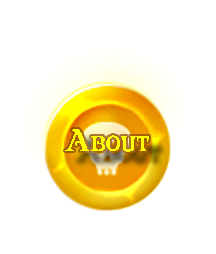
<style>
.page{position:relative;width:216px;height:254px;background:#ffffff}
.page>*{position:absolute;margin:0}
.t1{font:30px "skullsandcrossbones";color:#ffff00}
</style>
<div class="page">
<p class="t1" style="left:65px;top:129px;width:84px;height:23px">About</p>
</div>
